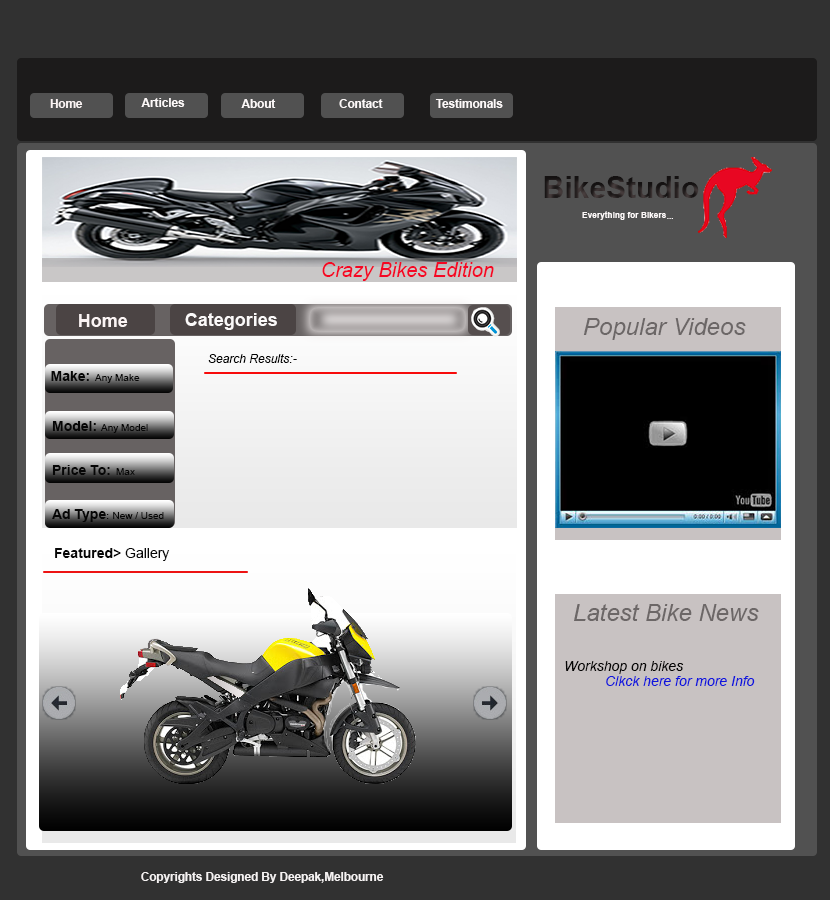
<style>
.page{position:relative;width:830px;height:900px}
.page>*{position:absolute;margin:0}
.t1{font:11.7px "Arial-BoldMT";color:#faf3f3}
.t2{font:11.7px "Arial-BoldMT";color:#fdf9f9}
.t3{font:30px "Arial-BoldMT";color:#241f1f}
.t4{font:8.3px "Arial-BoldMT";color:#fdf9f9}
.t5{font:20px "Arial-ItalicMT";color:#f40824}
.t6{font:18px "Arial-BoldMT";color:#fbf4f4}
.t7{font:18px "Arial-BoldMT";color:#fbf9f9}
.t8{font:24px "Arial-ItalicMT";color:#6c6767}
.t9{font:12px "Arial-ItalicMT";color:#030303}
.t10{font:14px "Arial-BoldMT";color:#060606}
.t11{font:10px "ArialMT";color:#060606}
.t12{font:14px "Arial-BoldMT";color:#080808}
.t13{font:14px "ArialMT";color:#080808}
.t14{font:14px "Arial-ItalicMT";color:#060505}
.t15{font:14px "Arial-ItalicMT";color:#1015dc}
.t16{font:11.7px "Arial-BoldMT";color:#f5f2f2}
</style>
<div class="page">
<p class="t1" style="left:50px;top:99px;width:33px;height:9px">Home</p>
<p class="t2" style="left:141px;top:98px;width:44px;height:9px">Articles</p>
<p class="t2" style="left:241px;top:99px;width:35px;height:9px">About</p>
<p class="t2" style="left:339px;top:99px;width:44px;height:9px">Contact</p>
<p class="t2" style="left:435px;top:99px;width:68px;height:9px">Testimonals</p>
<p class="t3" style="left:544px;top:176px;width:155px;height:22px">BikeStudio</p>
<p class="t4" style="left:582px;top:211px;width:84px;height:9px">Everything for Bikers</p>
<p class="t4" style="left:667px;top:218px;width:6px;height:1px">...</p>
<p class="t5" style="left:322px;top:262px;width:172px;height:19px">Crazy Bikes Edition</p>
<p class="t6" style="left:79px;top:314px;width:49px;height:13px">Home</p>
<p class="t7" style="left:185px;top:313px;width:92px;height:17px">Categories</p>
<p class="t8" style="left:583px;top:318px;width:163px;height:22px">Popular Videos</p>
<p class="t9" style="left:208px;top:354px;width:89px;height:9px">-:Search Results</p>
<p class="t10" style="left:51px;top:371px;width:38px;height:10px">:Make</p>
<p class="t11" style="left:94px;top:374px;width:46px;height:9px">Any Make</p>
<p class="t10" style="left:52px;top:421px;width:44px;height:10px">:Model</p>
<p class="t11" style="left:100px;top:424px;width:48px;height:9px">Any Model</p>
<p class="t10" style="left:52px;top:465px;width:58px;height:10px">:Price To</p>
<p class="t11" style="left:116px;top:468px;width:19px;height:7px">Max</p>
<p class="t10" style="left:52px;top:509px;width:57px;height:13px"><span class="t11">:</span>Ad Type</p>
<p class="t11" style="left:113px;top:512px;width:51px;height:7px">New / Used</p>
<p class="t12" style="left:55px;top:548px;width:66px;height:10px">&lt;Featured</p>
<p class="t13" style="left:125px;top:548px;width:45px;height:13px">Gallery</p>
<p class="t14" style="left:565px;top:661px;width:119px;height:13px">Workshop on bikes</p>
<p class="t15" style="left:606px;top:676px;width:149px;height:10px">Clkck here for more Info</p>
<p class="t16" style="left:141px;top:872px;width:243px;height:11px">Copyrights Designed By Deepak,Melbourne</p>
</div>
